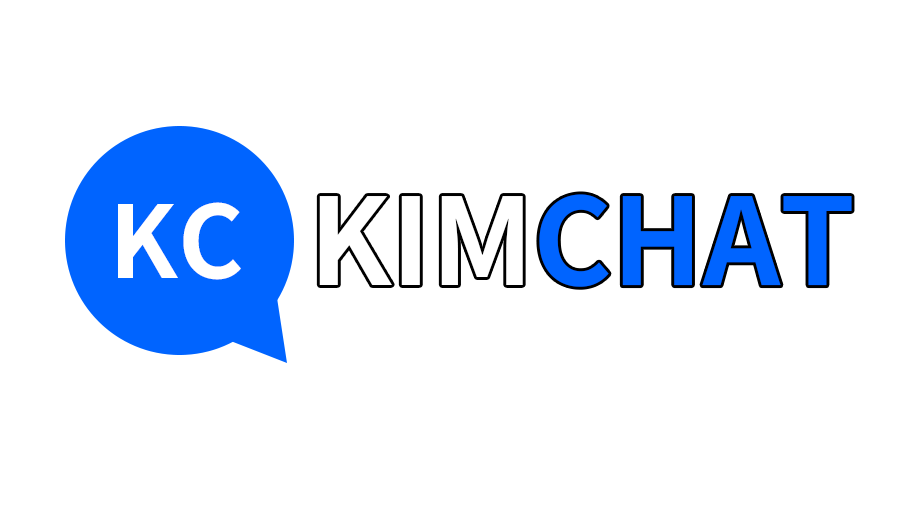
<style>
.page{position:relative;width:900px;height:512px;background:#ffffff}
.page>*{position:absolute;margin:0}
.t1{font:120px "NotoSansKR-Bold";color:#0064ff}
.t2{font:120px "NotoSansKR-Bold";color:#ffffff}
.t3{font:100px "NotoSansKR-Bold";color:#ffffff}
</style>
<div class="page">
<p class="t1" style="left:319px;top:194px;width:533px;height:93px"><span class="t2">KIM</span>CHAT</p>
<p class="t3" style="left:118px;top:202px;width:123px;height:78px">KC</p>
</div>
